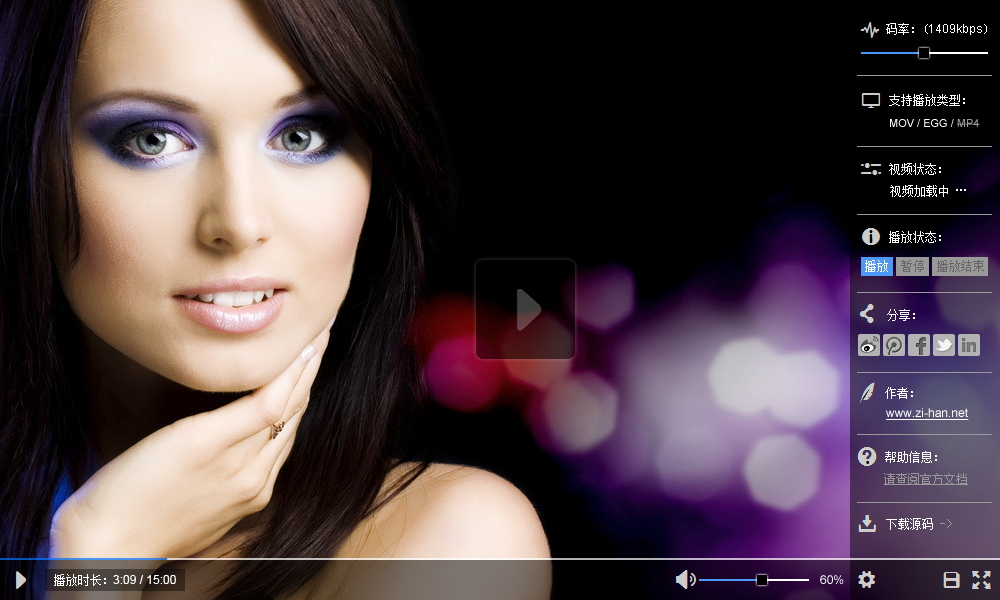
<style>
.page{position:relative;width:1000px;height:600px;background:#000000}
.page>*{position:absolute;margin:0}
.t1{font:12px "ArialMT";color:#ffffff}
.t2{font:12px "NSimSun";color:#ffffff}
.t3{font:11px "ArialMT";color:#ffffff}
.t4{font:11px "ArialMT";color:#999999}
.t5{font:12px "ArialMT";color:#ffffff;text-decoration:underline}
.t6{font:12px "NSimSun";color:#999999;text-decoration:underline}
.t7{font:12px "SimSun";color:#ffffff}
.t8{font:12px "SimSun";color:#999999}
</style>
<div class="page">
<p class="t1" style="left:886px;top:23px;width:101px;height:12px"><span class="t2">码率：(</span>1409kbps<span class="t2">)</span></p>
<p class="t2" style="left:889px;top:94px;width:76px;height:12px">支持播放类型：</p>
<p class="t3" style="left:890px;top:119px;width:90px;height:8px">MOV / EGG / <span class="t4">MP4</span></p>
<p class="t2" style="left:889px;top:163px;width:52px;height:12px">视频状态：</p>
<p class="t2" style="left:890px;top:185px;width:76px;height:12px">视频加载中 …</p>
<p class="t2" style="left:889px;top:231px;width:52px;height:12px">播放状态：</p>
<p class="t2" style="left:887px;top:309px;width:28px;height:12px">分享：</p>
<p class="t2" style="left:885px;top:387px;width:28px;height:12px">作者：</p>
<p class="t5" style="left:886px;top:408px;width:83px;height:12px">www.zi-han.net</p>
<p class="t2" style="left:885px;top:451px;width:52px;height:12px">帮助信息：</p>
<p class="t6" style="left:884px;top:473px;width:84px;height:12px">请查阅官方文档</p>
<p class="t7" style="left:886px;top:518px;width:66px;height:12px">下载源码<span class="t8"> -&gt;</span></p>
<p class="t7" style="left:54px;top:574px;width:52px;height:12px">播放时长：</p>
<p class="t1" style="left:113px;top:575px;width:63px;height:9px">3:09 / 15:00</p>
<p class="t1" style="left:820px;top:575px;width:24px;height:9px">60%</p>
</div>
